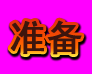
<style>
.page{position:relative;width:92px;height:74px;background:#ff00ff}
.page>*{position:absolute;margin:0}
.t1{font:36px "SimHei";color:#3d150d;font-weight:bold}
</style>
<div class="page">
<p class="t1" style="left:10px;top:20px;width:72px;height:35px">准备</p>
</div>
